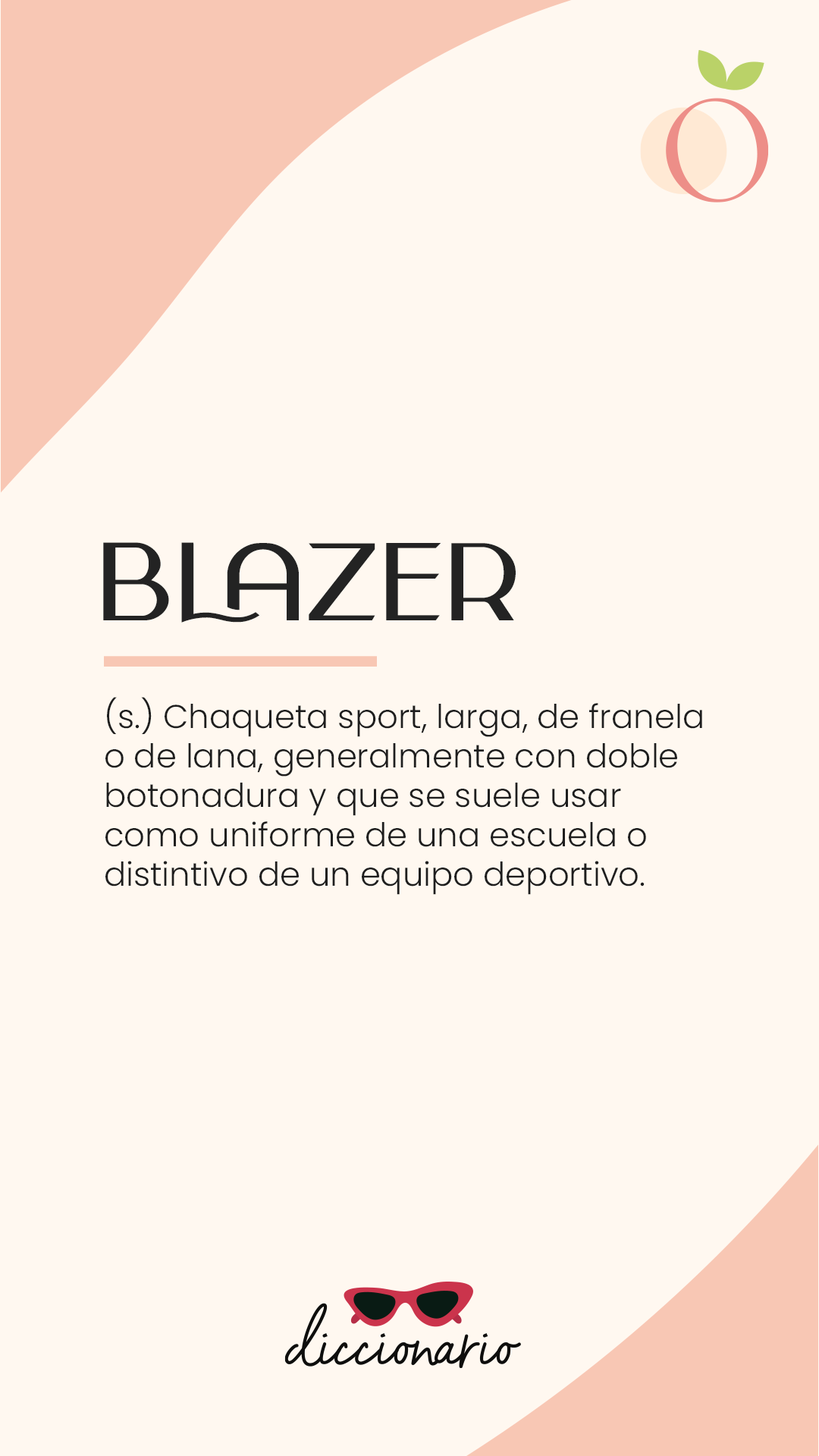
<style>
.page{position:relative;width:819px;height:1456px;background:#fff8f0}
.page>*{position:absolute;margin:0}
.t1{font:108.1px "CarlaSansRegular";color:#232323}
.t2{font:32.9px "Poppins-Light";color:#1e1e1e}
</style>
<div class="page">
<p class="t1" style="left:103px;top:542px;width:413px;height:81px">Blazer</p>
<p class="t2" style="left:105px;top:697px;width:597px;height:198px">(s.) Chaqueta sport, larga, de franela o de lana, generalmente con doble botonadura y que se suele usar como uniforme de una escuela o distintivo de un equipo deportivo.</p>
</div>
